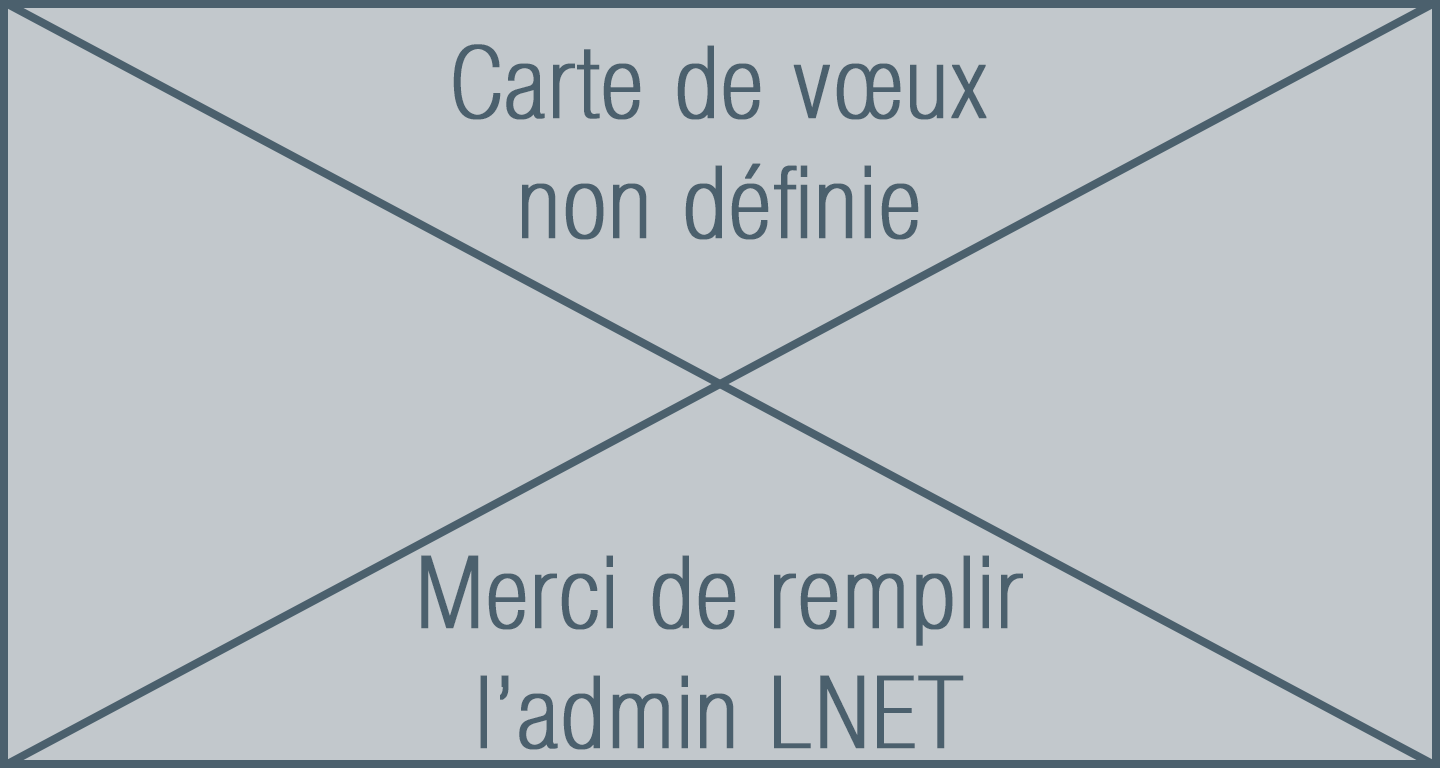
<style>
.page{position:relative;width:1440px;height:768px;background:#c2c8cc}
.page>*{position:absolute;margin:0}
.t1{font:100px "HelveticaNeueLTStd-ThCn";letter-spacing:0.015em;color:#4b606d;font-weight:bold}
</style>
<div class="page">
<p class="t1" style="left:453px;top:44px;width:534px;height:196px;text-align:center">Carte de vœux<br>non définie</p>
<p class="t1" style="left:421px;top:555px;width:602px;height:195px;text-align:center">Merci de remplir<br>l’admin LNET</p>
</div>
